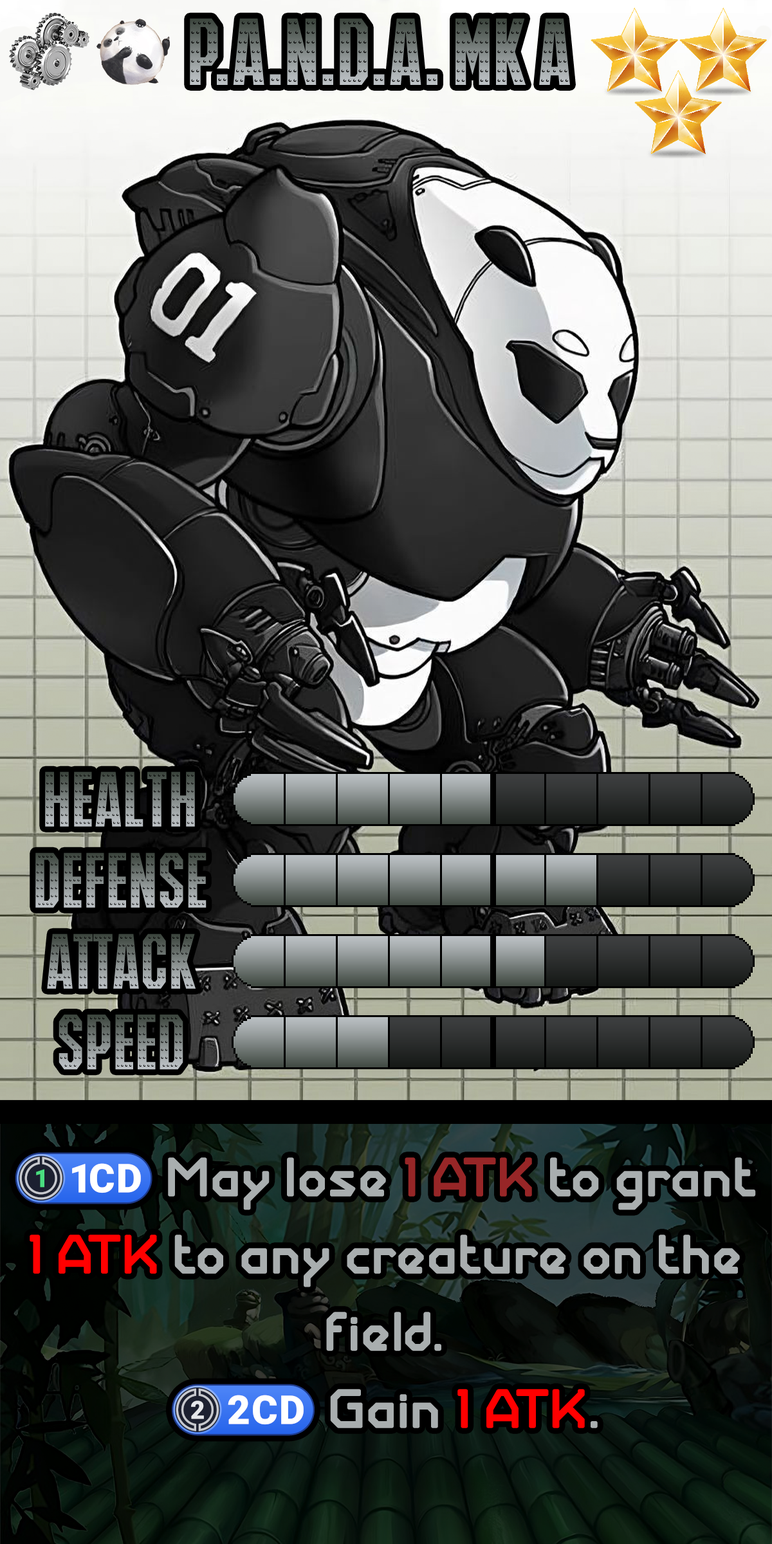
<style>
.page{position:relative;width:772px;height:1544px}
.page>*{position:absolute;margin:0}
.t1{font:128.7px "IRONMANOFWAR001BNCV"}
.t2{font:90.1px/77.2px "GiantRobotArmy-Medium";color:#a9aeaf}
.t3{font:90.1px/77.2px "stoogedings-Regular";color:#a9aeaf}
.t4{font:90.1px/77.2px "GiantRobotArmy-Medium";color:#972627}
.t5{font:90.1px/77.2px "GiantRobotArmy-Medium";color:#ff0000}
</style>
<div class="page">
<p class="t1" style="left:45px;top:772px;width:150px;height:55px">Health</p>
<p class="t1" style="left:35px;top:853px;width:172px;height:55px">Defense</p>
<p class="t1" style="left:47px;top:934px;width:149px;height:55px">Attack</p>
<p class="t1" style="left:59px;top:1015px;width:124px;height:55px">Speed</p>
<p class="t2" style="left:15px;top:1152px;width:741px;height:284px;text-align:center"><span class="t3">(1CD)</span> May lose <span class="t4">1 ATK </span>to grant <span class="t5">1 ATK</span> to any creature on the field.<br><span class="t3">(2CD)</span> Gain<span class="t5"> 1 ATK</span>.</p>
</div>
